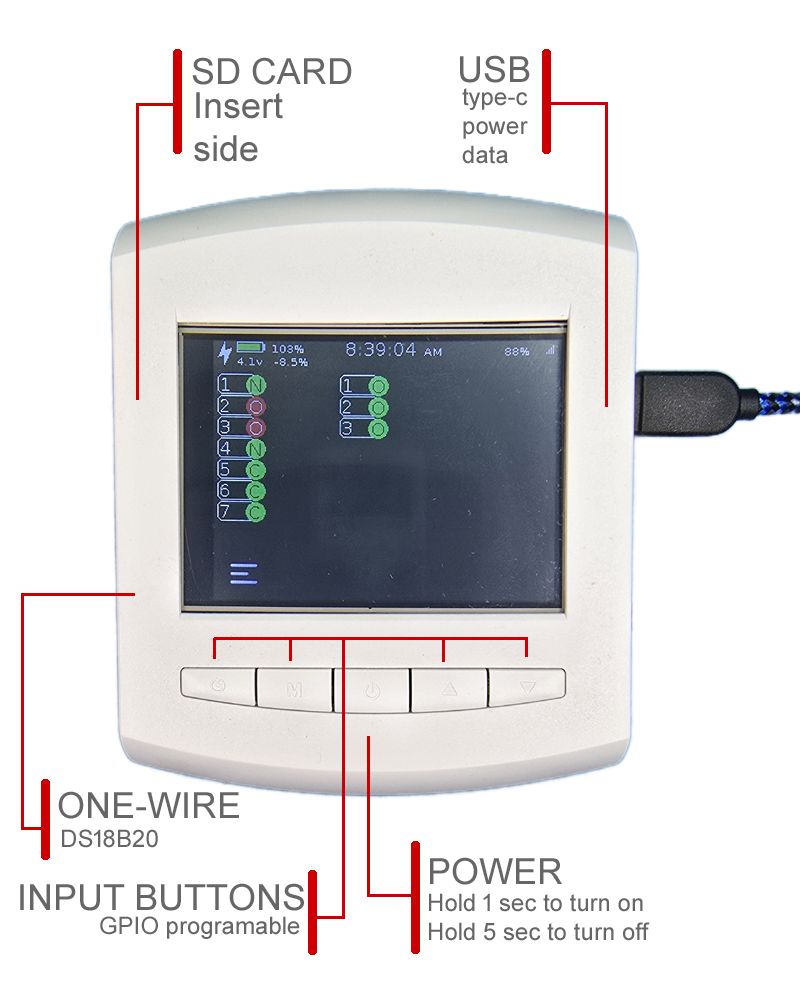
<style>
.page{position:relative;width:800px;height:991px;background:#ffffff}
.page>*{position:absolute;margin:0}
.t1{font:36px "ArialMT";color:#666666}
.t2{font:24px "ArialMT";color:#666666}
</style>
<div class="page">
<p class="t1" style="left:192px;top:57px;width:160px;height:28px">SD CARD</p>
<p class="t1" style="left:460px;top:55px;width:70px;height:28px">USB</p>
<p class="t2" style="left:462px;top:88px;width:66px;height:76px">type-c<br>power<br>data</p>
<p class="t1" style="left:194px;top:92px;width:89px;height:70px">Insert<br>side</p>
<p class="t1" style="left:58px;top:791px;width:181px;height:28px">ONE-WIRE</p>
<p class="t2" style="left:62px;top:829px;width:96px;height:19px">DS18B20</p>
<p class="t1" style="left:430px;top:857px;width:132px;height:28px">POWER</p>
<p class="t1" style="left:20px;top:883px;width:284px;height:28px">INPUT BUTTONS</p>
<p class="t2" style="left:429px;top:893px;width:221px;height:48px">Hold 1 sec to turn on<br>Hold 5 sec to turn off</p>
<p class="t2" style="left:100px;top:916px;width:200px;height:23px">GPIO programable</p>
</div>
